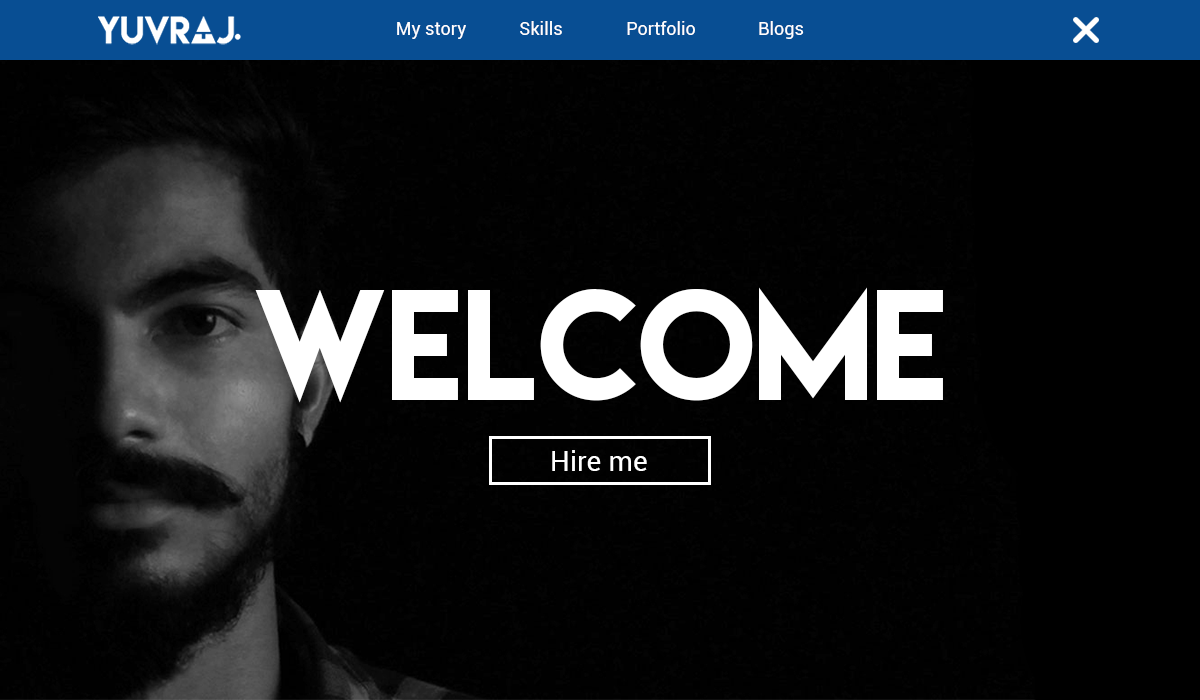
<style>
.page{position:relative;width:1200px;height:700px;background:#010101}
.page>*{position:absolute;margin:0}
.t1{font:18px "Roboto-Regular";color:#ffffff}
.t2{font:140px "LemonMilk";color:#ffffff}
.t3{font:27.8px "Roboto-Regular";color:#ffffff}
</style>
<div class="page">
<p class="t1" style="left:397px;top:22px;width:69px;height:17px">My story</p>
<p class="t1" style="left:520px;top:21px;width:42px;height:14px">Skills</p>
<p class="t1" style="left:627px;top:21px;width:68px;height:14px">Portfolio</p>
<p class="t1" style="left:759px;top:21px;width:45px;height:18px">Blogs</p>
<p class="t2" style="left:255px;top:287px;width:688px;height:116px">welcome</p>
<p class="t3" style="left:552px;top:450px;width:95px;height:21px">Hire me</p>
</div>
